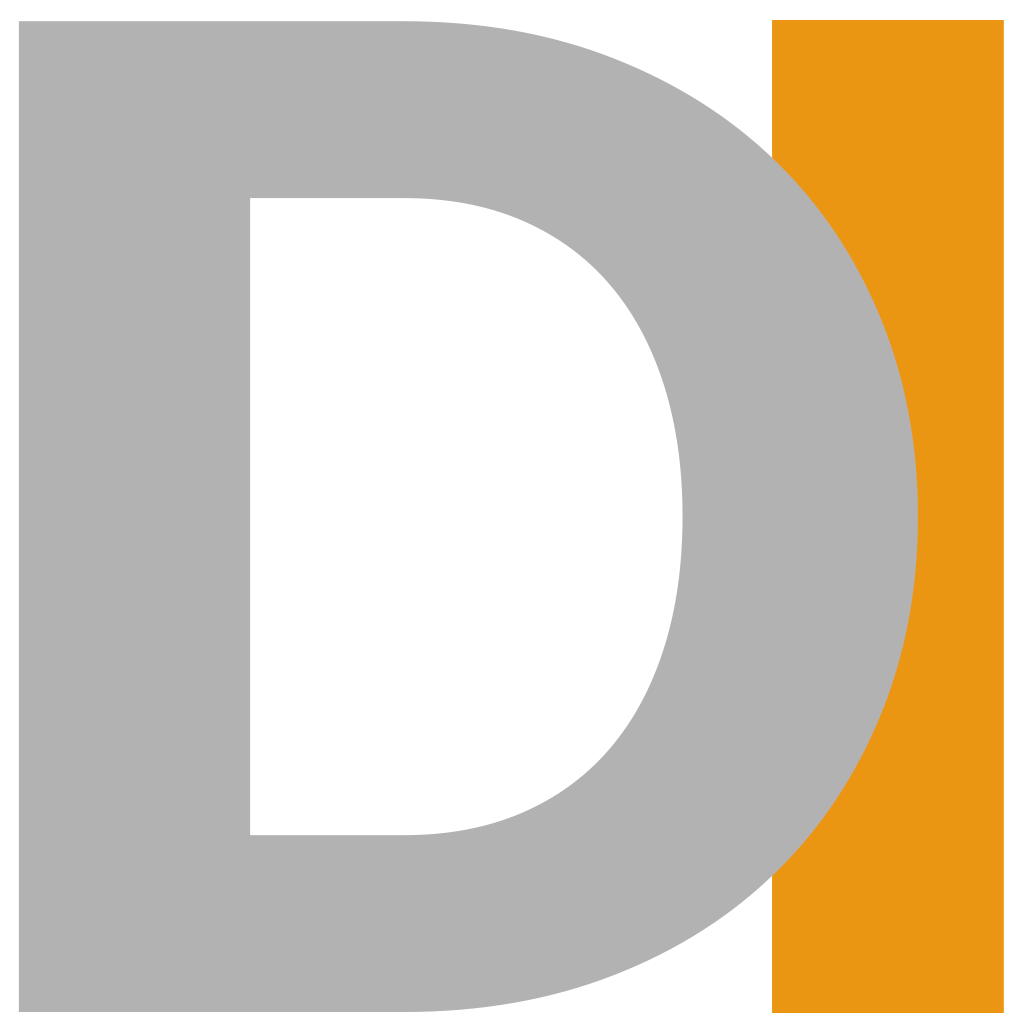
<style>
.page{position:relative;width:1024px;height:1024px;background:#b2b2b2}
.page>*{position:absolute;margin:0}
.t1{font:1359.6px "Lato-Black";color:#b2b2b2}
</style>
<div class="page">
<p class="t1" style="left:18px;top:21px;width:900px;height:991px">D</p>
</div>
